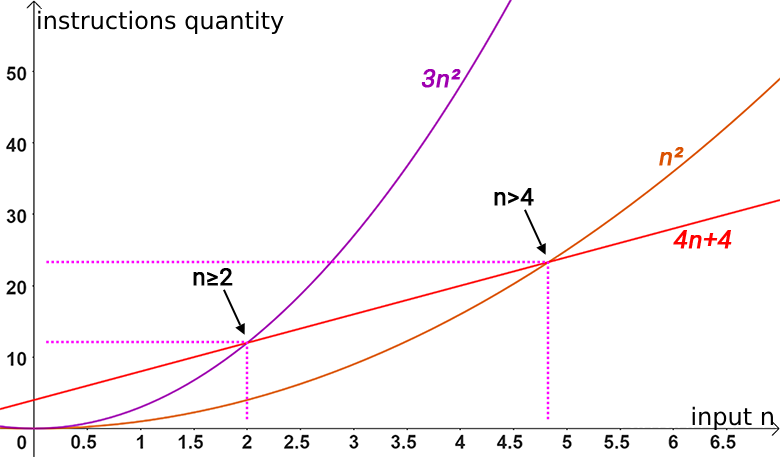
<style>
.page{position:relative;width:780px;height:457px;background:#ffffff}
.page>*{position:absolute;margin:0}
.t1{font:24px "DejaVuSans";color:#000000}
.t2{font:25px "Roboto-Regular";color:#9f00b0;font-weight:bold;font-style:italic}
.t3{font:25px "Roboto-Regular";color:#db5202;font-weight:bold;font-style:italic}
.t4{font:24px "Roboto-Regular";color:#000000;font-weight:bold}
.t5{font:25px "Roboto-Regular";color:#ff0000;font-weight:bold;font-style:italic}
</style>
<div class="page">
<p class="t1" style="left:38px;top:10px;width:246px;height:24px">instructions quantity</p>
<p class="t2" style="left:421px;top:69px;width:40px;height:19px">3n²</p>
<p class="t3" style="left:659px;top:147px;width:25px;height:19px">n²</p>
<p class="t4" style="left:494px;top:188px;width:40px;height:18px">n&gt;4</p>
<p class="t5" style="left:673px;top:230px;width:59px;height:19px">4n+4</p>
<p class="t4" style="left:193px;top:268px;width:40px;height:18px">n≥2</p>
<p class="t1" style="left:692px;top:406px;width:81px;height:24px">input n</p>
</div>
